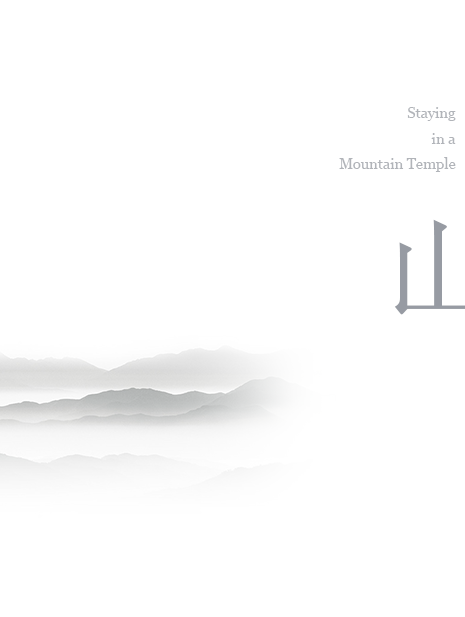
<style>
.page{position:relative;width:465px;height:617px;background:#ffffff}
.page>*{position:absolute;margin:0}
.t1{font:14.7px "Georgia";color:#b1b4b9}
</style>
<div class="page">
<p class="t1" style="left:339px;top:107px;width:117px;height:65px;text-align:right">Staying <br>in a <br>Mountain Temple</p>
</div>
